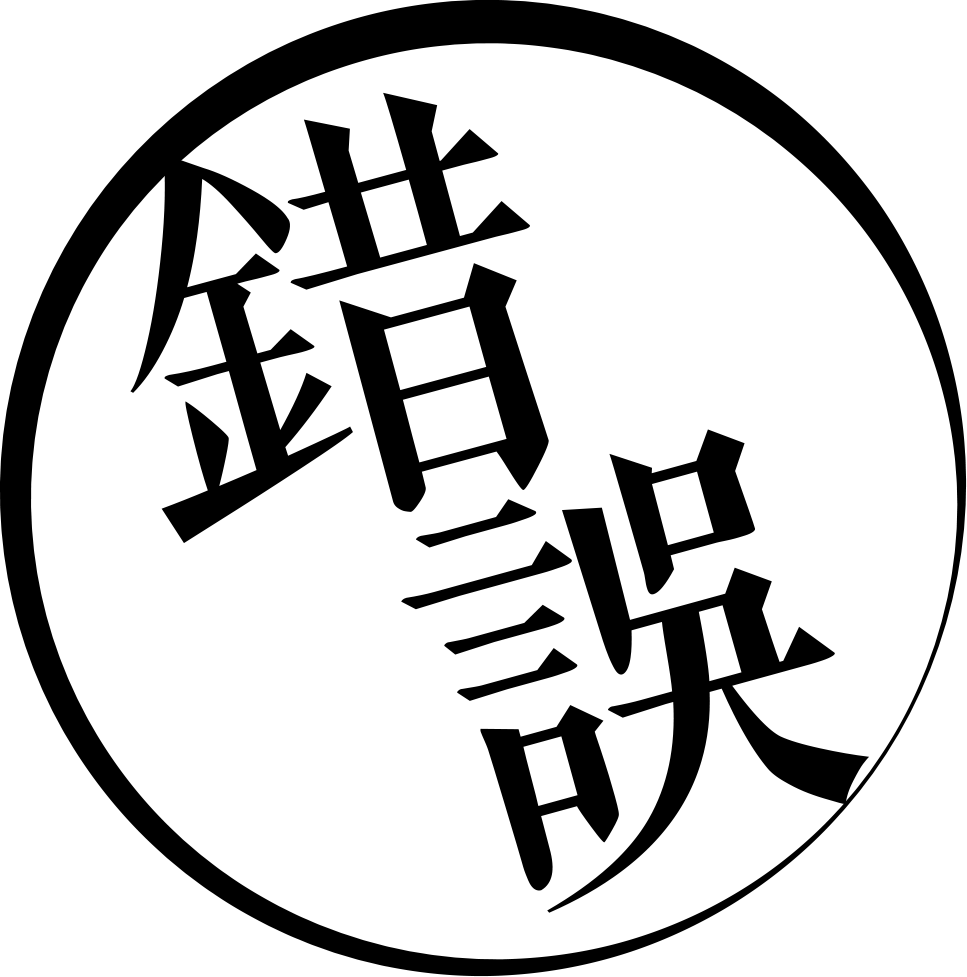
<style>
.page{position:relative;width:967px;height:977px;background:#ffffff}
.page>*{position:absolute;margin:0}
.t1{font:432.6px "ChekiangShuKeSung";color:#000000}
.t2{font:433.4px "ChekiangShuKeSung";color:#000000}
</style>
<div class="page">
<p class="t1" style="left:130px;top:92px;width:419px;height:452px">錯</p>
<p class="t2" style="left:401px;top:429px;width:469px;height:484px">誤</p>
</div>
